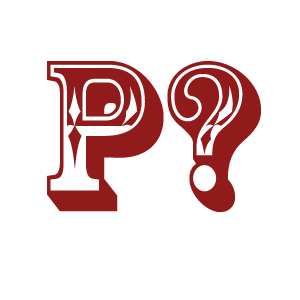
<style>
.page{position:relative;width:300px;height:300px;background:#ffffff}
.page>*{position:absolute;margin:0}
.t1{font:200px "RosewoodStd-Regular";color:#911a1a;font-variant:small-caps}
</style>
<div class="page">
<p class="t1" style="left:47px;top:61px;width:214px;height:151px">P?</p>
</div>
